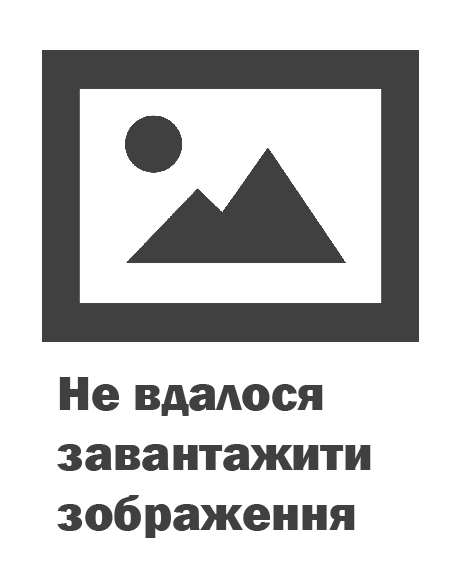
<style>
.page{position:relative;width:461px;height:583px;background:#ffffff}
.page>*{position:absolute;margin:0}
.t1{font:50px "FranklinGothic-Heavy";color:#404040}
</style>
<div class="page">
<p class="t1" style="left:57px;top:377px;width:314px;height:161px">Не вдалося завантажити зображення</p>
</div>
